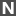
<style>
.page{position:relative;width:16px;height:16px;background:#4d4d4d}
.page>*{position:absolute;margin:0}
.t1{font:16.7px "SegoeUI-Bold";letter-spacing:-0.04em;color:#ffffff}
</style>
<div class="page">
<p class="t1" style="left:2px;top:2px;width:12px;height:12px">N</p>
</div>
